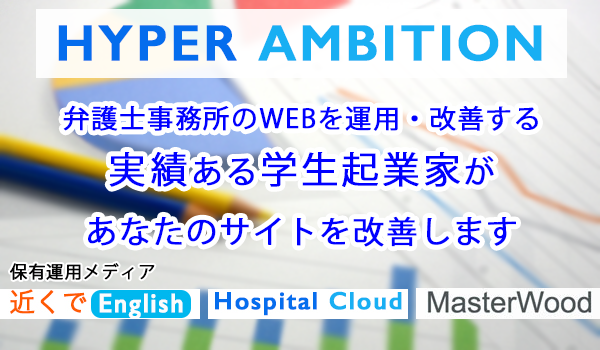
<style>
.page{position:relative;width:600px;height:350px}
.page>*{position:absolute;margin:0}
.t1{font:51px "GillSans-SemiBold";letter-spacing:0.05em;color:#18aff3;font-weight:bold}
.t2{font:51px "GillSans-SemiBold";letter-spacing:0.05em;color:#056ded;font-weight:bold}
.t3{font:26px "KozGoPr6N-Regular";letter-spacing:0.05em;color:#0000ff;font-weight:bold}
.t4{font:37px "KozGoPr6N-Regular";letter-spacing:0.09em;color:#0000ff;font-weight:bold}
.t5{font:31px "KozGoPr6N-Regular";letter-spacing:0.09em;color:#0000ff;font-weight:bold}
.t6{font:37px "KozGoPr6N-Regular";letter-spacing:0.07em;color:#0000ff;font-weight:bold}
.t7{font:31px "KozGoPr6N-Regular";letter-spacing:0.05em;color:#0000ff;font-weight:bold}
.t8{font:17px "KozGoPr6N-Regular";letter-spacing:0.05em;color:#040404;font-weight:bold}
</style>
<div class="page">
<p class="t1" style="left:58px;top:24px;width:484px;height:38px"><span class="t2">HYPER </span>AMBITION</p>
<p class="t3" style="left:63px;top:105px;width:475px;height:142px;text-align:center">弁護士事務所のWEBを運用・改善する<br><span class="t4">実績</span><span class="t5">ある</span><span class="t6">学生起業家</span><span class="t7">が<br>あなたのサイトを改善します</span></p>
<p class="t8" style="left:10px;top:263px;width:145px;height:17px">保有運用メディア</p>
</div>
